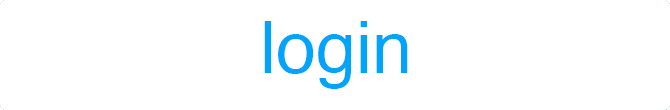
<style>
.page{position:relative;width:670px;height:110px;background:#ffffff}
.page>*{position:absolute;margin:0}
.t1{font:72px "Helvetica";color:#00a5fb}
</style>
<div class="page">
<p class="t1" style="left:264px;top:21px;width:144px;height:68px">login</p>
</div>
